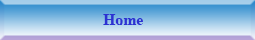
<style>
.page{position:relative;width:255px;height:40px}
.page>*{position:absolute;margin:0}
.t1{font:15.8px "TimesNewRomanPS-BoldMT";color:#2c32d2}
</style>
<div class="page">
<p class="t1" style="left:103px;top:14px;width:40px;height:11px">Home</p>
</div>
